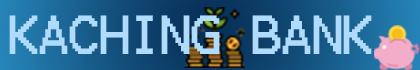
<style>
.page{position:relative;width:420px;height:70px}
.page>*{position:absolute;margin:0}
.t1{font:44.1px "Terminal";letter-spacing:-0.06em;color:#afdcfc}
</style>
<div class="page">
<p class="t1" style="left:9px;top:15px;width:363px;height:39px">KACHING BANK</p>
</div>
